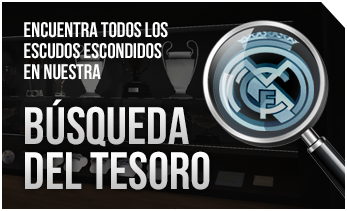
<style>
.page{position:relative;width:347px;height:211px}
.page>*{position:absolute;margin:0}
.t1{font:21px/21px "BebasNeue";color:#ffffff}
.t2{font:52.6px "BebasNeue"}
</style>
<div class="page">
<p class="t1" style="left:24px;top:22px;width:144px;height:58px">encuentra todos los<br>escudos escondidos<br>en nuestra</p>
<p class="t2" style="left:25px;top:99px;width:164px;height:48px">Búsqueda</p>
<p class="t2" style="left:25px;top:151px;width:185px;height:39px">del tesoro</p>
</div>
